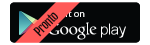
<style>
.page{position:relative;width:150px;height:45px;background:#050708}
.page>*{position:absolute;margin:0}
.t1{font:12px "FjallaOne-Regular";letter-spacing:-0.05em;color:#0e0e0e}
.t2{font:10px "MyriadPro-Regular"}
</style>
<div class="page">
<p class="t1" style="left:33px;top:12px;width:26px;height:25px;rotate:-45deg">Pronto</p>
<p class="t2" style="left:49px;top:10px;width:36px;height:7px">Get it on</p>
</div>
